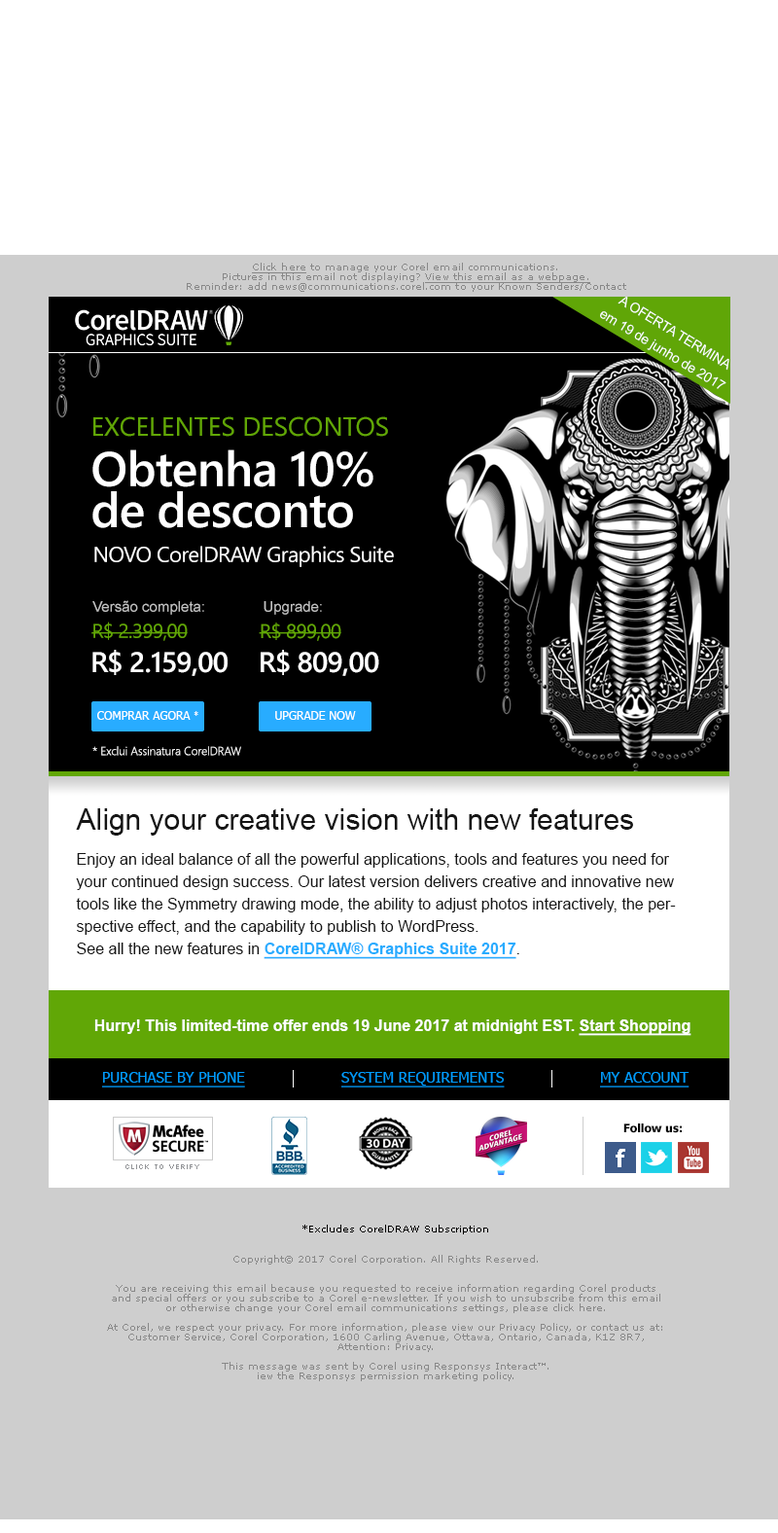
<style>
.page{position:relative;width:778px;height:1533px;background:#ffffff}
.page>*{position:absolute;margin:0}
.t1{font:9.7px/9.7px "Verdana";letter-spacing:0.004em;color:#888888}
.t2{font:9.7px/9.7px "Verdana";letter-spacing:0.004em;color:#888888;text-decoration:underline}
.t3{font:13.6px/21.4px "ArialMT";letter-spacing:-0.01em;color:#ffffff}
.t4{font:13.6px/21.4px "ArialMT";letter-spacing:-0.01em;color:#ffffff;text-transform:uppercase}
.t5{font:26.3px "SegoeUI";color:#61a706;text-transform:uppercase}
.t6{font:48.6px/41.1px "SegoeUI-Semibold";letter-spacing:-0.015em;color:#ffffff}
.t7{font:21.4px "SegoeUI";letter-spacing:-0.025em;color:#ffffff}
.t8{font:14.6px "ArialMT";color:#c1c1c1}
.t9{font:19.9px "SegoeUI";letter-spacing:-0.025em;color:#61a706}
.t10{font:28.4px "SegoeUI-Semibold";letter-spacing:-0.025em;color:#ffffff}
.t11{font:11.7px "Tahoma";color:#ffffff;text-transform:uppercase}
.t12{font:8.8px "Tahoma";color:#ffffff;text-transform:uppercase}
.t13{font:11.7px "SegoeUI-Light";color:#ffffff}
.t14{font:29.2px "ArialMT";color:#151515}
.t15{font:15.6px/22.4px "ArialMT";color:#151515}
.t16{font:15.6px/22.4px "Arial-BoldMT";color:#28acff;text-decoration:underline}
.t17{font:15.6px "Arial-BoldMT";color:#ffffff}
.t18{font:15.6px "Arial-BoldMT";color:#ffffff;text-decoration:underline}
.t19{font:14.6px "Tahoma";color:#009cff;text-decoration:underline}
.t20{font:11.7px "Tahoma-Bold";color:#000000}
.t21{font:23.3px "Tahoma-Bold";color:#ffffff}
.t22{font:9.7px "Verdana";color:#010000}
.t23{font:9.7px/9.7px "Verdana";color:#888888}
</style>
<div class="page">
<p class="t1" style="left:187px;top:263px;width:439px;height:29px;text-align:center"><span class="t2">Click here</span> to manage your Corel email communications. <br>Pictures in this email not displaying? <span class="t2">View this email as a webpage.</span> <br>Reminder: add news@communications.corel.com to your Known Senders/Contact list.</p>
<p class="t3" style="left:600px;top:297px;width:129px;height:92px;text-align:center;rotate:31deg"><span class="t4">A oferta TERMINA <br></span>em 19 de junho de 2017</p>
<p class="t5" style="left:93px;top:416px;width:295px;height:21px">EXCELENTES DESCONTOS</p>
<p class="t6" style="left:92px;top:449px;width:281px;height:79px">Obtenha 10% <br>de desconto</p>
<p class="t7" style="left:94px;top:546px;width:300px;height:21px">NOVO CorelDRAW Graphics Suite 2017</p>
<p class="t8" style="left:92px;top:600px;width:112px;height:15px">Versão completa:</p>
<p class="t8" style="left:264px;top:601px;width:58px;height:14px">Upgrade:</p>
<p class="t9" style="left:91px;top:621px;width:97px;height:20px">R$ 2.399,00</p>
<p class="t9" style="left:259px;top:622px;width:82px;height:19px">R$ 899,00</p>
<p class="t10" style="left:92px;top:650px;width:136px;height:26px">R$ 2.159,00</p>
<p class="t10" style="left:261px;top:650px;width:118px;height:26px">R$ 809,00</p>
<p class="t11" style="left:97px;top:711px;width:101px;height:9px">COMPRAR AGORA <span class="t12">*</span></p>
<p class="t11" style="left:275px;top:711px;width:81px;height:9px">Upgrade NOW</p>
<p class="t13" style="left:92px;top:746px;width:149px;height:10px">* Exclui Assinatura CorelDRAW</p>
<p class="t14" style="left:76px;top:808px;width:557px;height:27px">Align your creative vision with new features</p>
<p class="t15" style="left:76px;top:853px;width:600px;height:106px">Enjoy an ideal balance of all the powerful applications, tools and features you need for your continued design success. Our latest version delivers creative and innovative new tools like the Symmetry drawing mode, the ability to adjust photos interactively, the perspective effect, and the capability to publish to WordPress. <br>See all the new features in <span class="t16">CorelDRAW® Graphics Suite 2017</span>.</p>
<p class="t17" style="left:94px;top:1019px;width:597px;height:17px">Hurry! This limited-time offer ends 19 June 2017 at midnight EST. <span class="t18">Start Shopping</span></p>
<p class="t19" style="left:102px;top:1072px;width:143px;height:15px">PURCHASE BY PHONE</p>
<p class="t19" style="left:341px;top:1072px;width:164px;height:15px">SYSTEM REQUIREMENTS</p>
<p class="t19" style="left:600px;top:1072px;width:90px;height:15px">MY ACCOUNT</p>
<p class="t20" style="left:623px;top:1123px;width:59px;height:10px">Follow us:</p>
<p class="t21" style="left:616px;top:1149px;width:9px;height:18px">f</p>
<p class="t22" style="left:302px;top:1224px;width:186px;height:10px">*Excludes CorelDRAW Subscription</p>
<p class="t23" style="left:107px;top:1255px;width:555px;height:126px;text-align:center">Copyright© 2017 Corel Corporation. All Rights Reserved. <br><br><br>You are receiving this email because you requested to receive information regarding Corel products <br>and special offers or you subscribe to a Corel e-newsletter. If you wish to unsubscribe from this email <br>or otherwise change your Corel email communications settings, please click here. <br><br>At Corel, we respect your privacy. For more information, please view our Privacy Policy, or contact us at: <br>Customer Service, Corel Corporation, 1600 Carling Avenue, Ottawa, Ontario, Canada, K1Z 8R7, <br>Attention: Privacy. <br><br>This message was sent by Corel using Responsys Interact™. <br>iew the Responsys permission marketing policy.</p>
</div>
